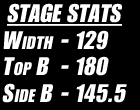
<style>
.page{position:relative;width:140px;height:110px;background:#000000}
.page>*{position:absolute;margin:0}
.t1{font:25px "Genuine";color:#ffffff;font-style:italic}
.t2{font:18px "Genuine";letter-spacing:0.03em;color:#ffffff;font-style:italic}
.t3{font:25px "Genuine";letter-spacing:0.05em;color:#ffffff;font-style:italic}
</style>
<div class="page">
<p class="t1" style="left:7px;top:3px;width:116px;height:20px">STAGE STATS</p>
<p class="t1" style="left:61px;top:30px;width:49px;height:20px">- 129</p>
<p class="t2" style="left:3px;top:31px;width:51px;height:18px"><span class="t3">W</span>IDTH</p>
<p class="t2" style="left:4px;top:57px;width:46px;height:19px"><span class="t3">T</span>OP <span class="t3">B</span></p>
<p class="t1" style="left:61px;top:56px;width:48px;height:20px">- 180</p>
<p class="t2" style="left:2px;top:83px;width:52px;height:20px"><span class="t3">S</span>IDE <span class="t3">B</span></p>
<p class="t1" style="left:61px;top:84px;width:66px;height:19px">- 145.5</p>
</div>
